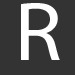
<style>
.page{position:relative;width:75px;height:75px;background:#333333}
.page>*{position:absolute;margin:0}
.t1{font:84.2px "MyriadPro-Regular";color:#ffffff;scale:1.05 1}
</style>
<div class="page">
<p class="t1" style="left:21px;top:3px;width:39px;height:57px">R</p>
</div>
